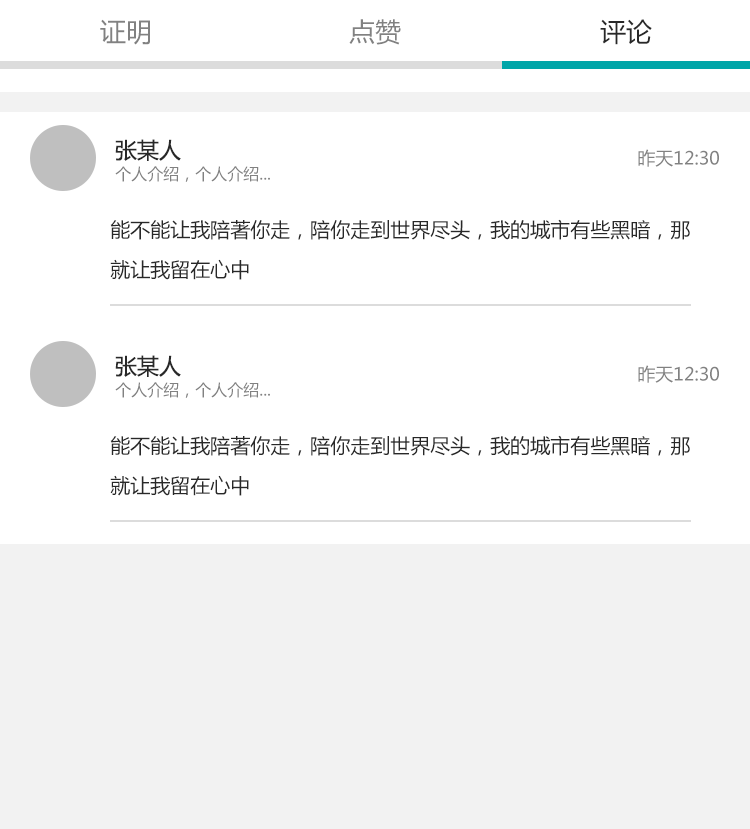
<style>
.page{position:relative;width:750px;height:829px;background:#ffffff}
.page>*{position:absolute;margin:0}
.t1{font:26px "MicrosoftYaHei";color:#818181}
.t2{font:26px "MicrosoftYaHei";color:#282828}
.t3{font:22px "MicrosoftYaHei";color:#282828}
.t4{font:18px "MicrosoftYaHei";color:#818181}
.t5{font:16px "MicrosoftYaHei";color:#818181}
.t6{font:20px/40px "MicrosoftYaHei";color:#282828}
</style>
<div class="page">
<p class="t1" style="left:100px;top:19px;width:50px;height:26px">证明</p>
<p class="t1" style="left:349px;top:19px;width:52px;height:26px">点赞</p>
<p class="t2" style="left:600px;top:19px;width:52px;height:26px">评论</p>
<p class="t3" style="left:115px;top:139px;width:66px;height:22px">张某人</p>
<p class="t4" style="left:638px;top:149px;width:81px;height:18px">昨天12:30</p>
<p class="t5" style="left:115px;top:166px;width:155px;height:16px">个人介绍，个人介绍...</p>
<p class="t6" style="left:110px;top:219px;width:580px;height:61px">能不能让我陪著你走，陪你走到世界尽头，我的城市有些黑暗，那<br>就让我留在心中</p>
<p class="t3" style="left:115px;top:355px;width:66px;height:22px">张某人</p>
<p class="t4" style="left:638px;top:365px;width:81px;height:18px">昨天12:30</p>
<p class="t5" style="left:115px;top:382px;width:155px;height:16px">个人介绍，个人介绍...</p>
<p class="t6" style="left:110px;top:435px;width:580px;height:61px">能不能让我陪著你走，陪你走到世界尽头，我的城市有些黑暗，那<br>就让我留在心中</p>
</div>
